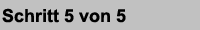
<style>
.page{position:relative;width:200px;height:30px;background:#c1c1c1}
.page>*{position:absolute;margin:0}
.t1{font:18px "Arial-BoldMT";color:#000000}
</style>
<div class="page">
<p class="t1" style="left:2px;top:8px;width:124px;height:15px">Schritt 5 von 5</p>
</div>
